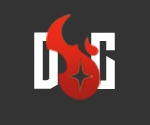
<style>
.page{position:relative;width:150px;height:125px;background:#333333}
.page>*{position:absolute;margin:0}
.t1{font:72px "LongShot";color:#ffffff}
</style>
<div class="page">
<p class="t1" style="left:34px;top:32px;width:24px;height:57px">D</p>
<p class="t1" style="left:91px;top:32px;width:24px;height:57px">C</p>
</div>
